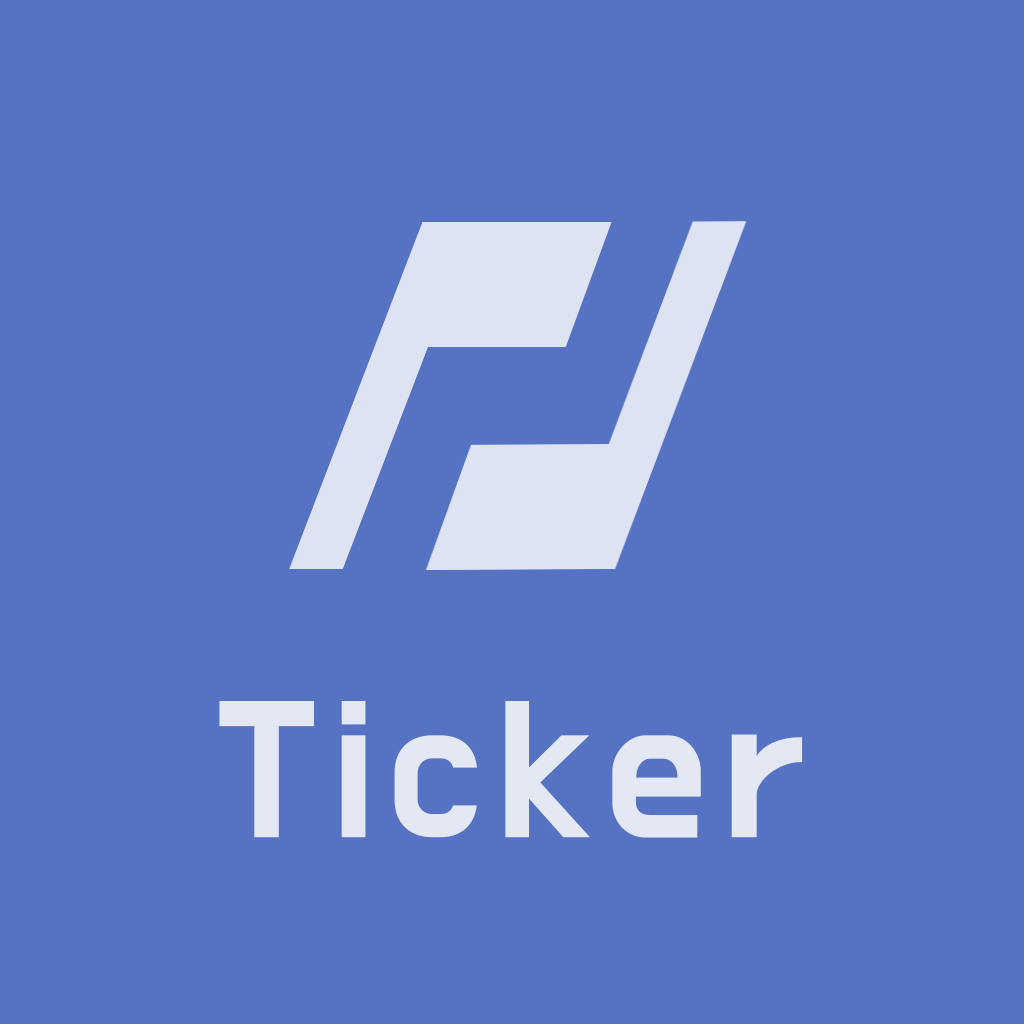
<style>
.page{position:relative;width:1024px;height:1024px;background:#5572c3}
.page>*{position:absolute;margin:0}
.t1{font:160px "BMDoHyeon-OTF";letter-spacing:0.1em;color:#e4e7f4}
</style>
<div class="page">
<p class="t1" style="left:219px;top:701px;width:584px;height:137px">Ticker</p>
</div>
